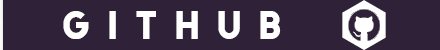
<style>
.page{position:relative;width:440px;height:50px;background:#2f2137}
.page>*{position:absolute;margin:0}
.t1{font:37.5px "TheNextFont";letter-spacing:0.48em;color:#ffffff}
</style>
<div class="page">
<p class="t1" style="left:63px;top:11px;width:218px;height:28px">GITHUB</p>
</div>
